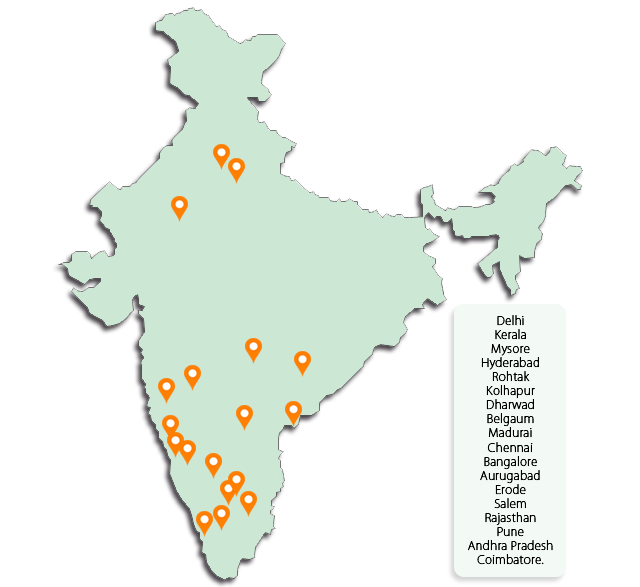
<style>
.page{position:relative;width:640px;height:587px;background:#ffffff}
.page>*{position:absolute;margin:0}
.t1{font:11.7px "KozGoPr6N-ExtraLight";color:#000000;font-weight:bold}
</style>
<div class="page">
<p class="t1" style="left:468px;top:315px;width:85px;height:250px;text-align:center">Delhi<br>Kerala<br>Mysore<br>Hyderabad<br>Rohtak<br>Kolhapur<br>Dharwad<br>Belgaum<br>Madurai<br>Chennai<br>Bangalore<br>Aurugabad<br>Erode<br>Salem<br>Rajasthan<br>Pune<br>Andhra Pradesh<br>Coimbatore.</p>
</div>
